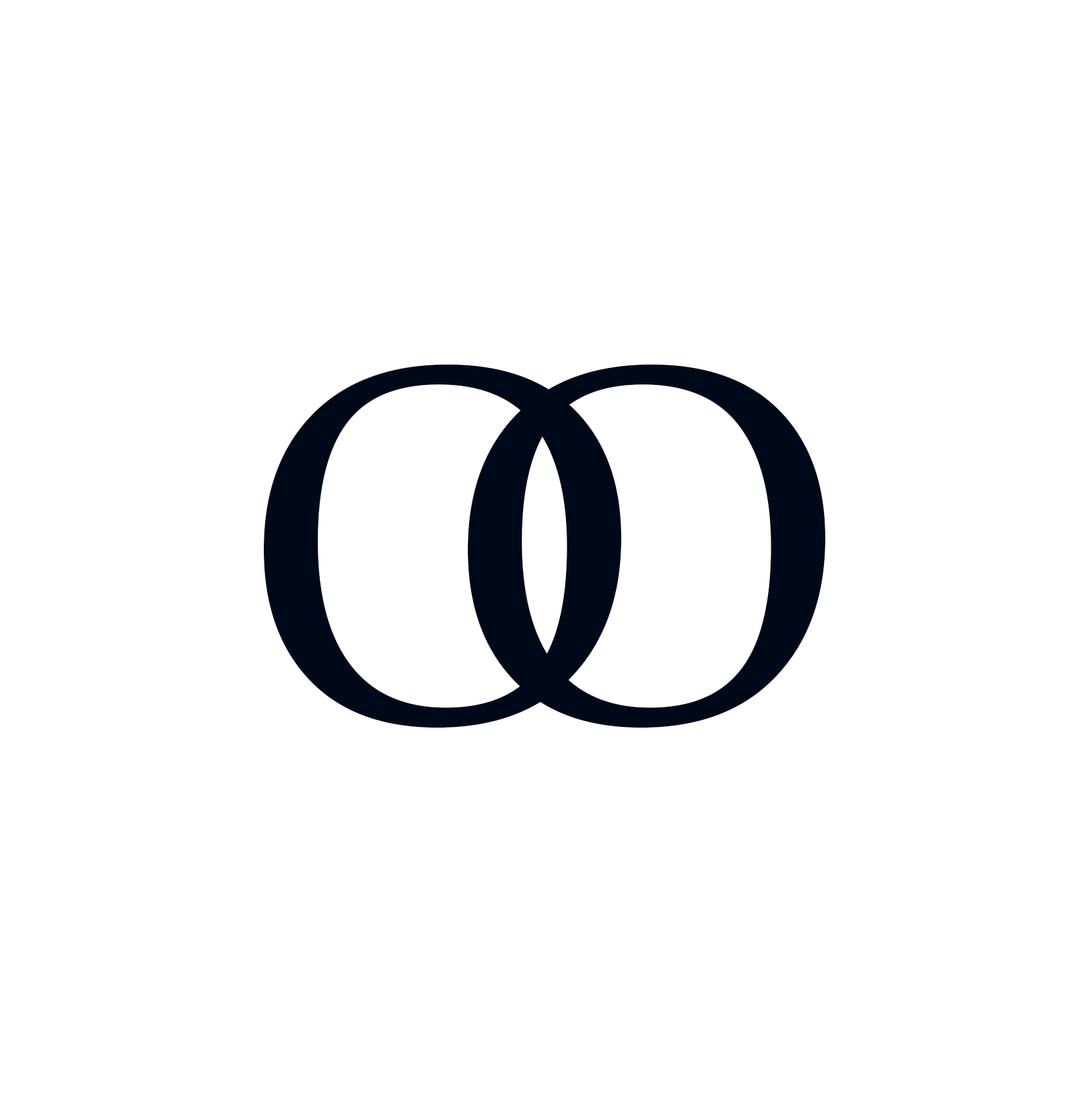
<style>
.page{position:relative;width:1091px;height:1093px;background:#ffffff}
.page>*{position:absolute;margin:0}
.t1{font:505.8px "Constantia";letter-spacing:-0.4em;color:#000919}
</style>
<div class="page">
<p class="t1" style="left:263px;top:364px;width:563px;height:364px">OO</p>
</div>
